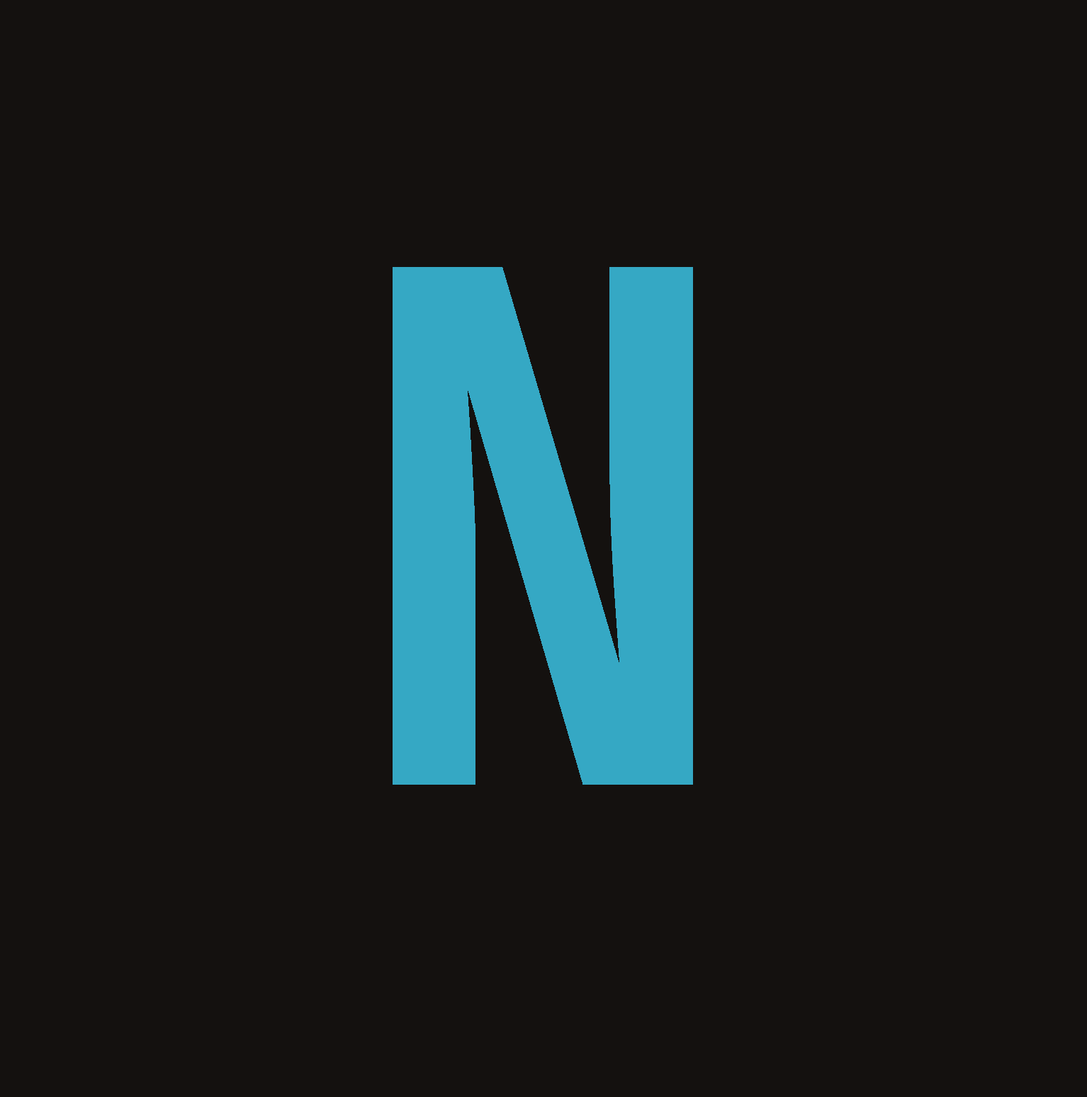
<style>
.page{position:relative;width:1087px;height:1097px;background:#14110f}
.page>*{position:absolute;margin:0}
.t1{font:708.4px "JetBrainsMonoRoman-ExtraBold";letter-spacing:0.005em;color:#35a8c4;text-decoration:underline;scale:0.88 1}
</style>
<div class="page">
<p class="t1" style="left:355px;top:267px;width:378px;height:696px">N</p>
</div>
